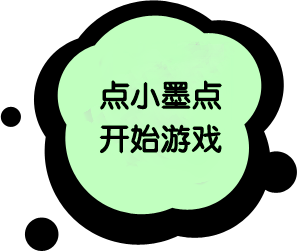
<style>
.page{position:relative;width:297px;height:251px;background:#ffffff}
.page>*{position:absolute;margin:0}
.t1{font:30px/43.5px "FZY3JW--GB1-0";color:#000000;font-weight:bold}
</style>
<div class="page">
<p class="t1" style="left:99px;top:80px;width:123px;height:74px;text-align:center">点小墨点<br>开始游戏</p>
</div>
